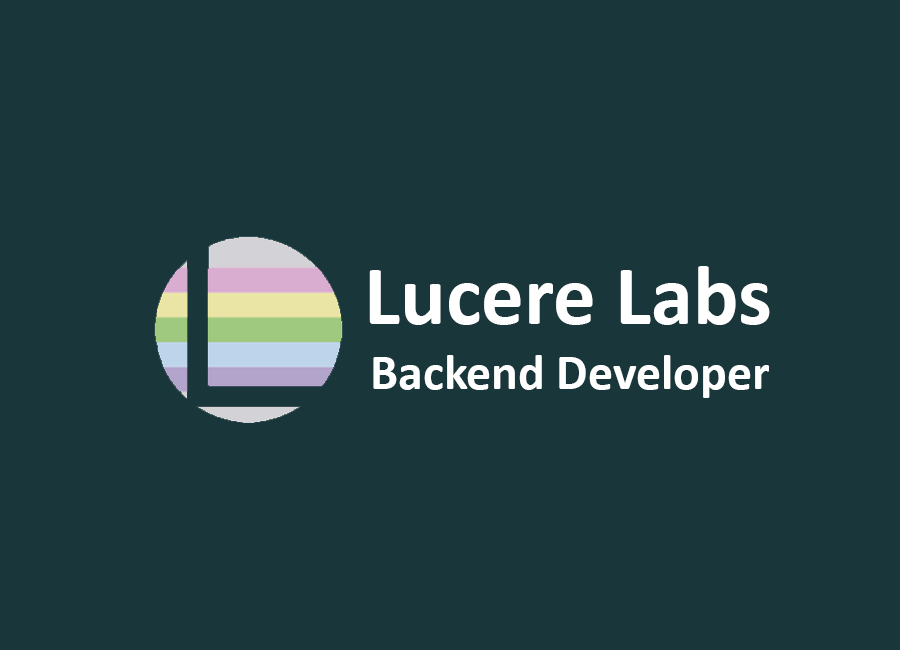
<style>
.page{position:relative;width:900px;height:650px;background:#19373b}
.page>*{position:absolute;margin:0}
.t1{font:85px "Calibri-Bold";color:#ffffff}
.t2{font:50px "Calibri-Bold";color:#ffffff}
</style>
<div class="page">
<p class="t1" style="left:369px;top:266px;width:401px;height:59px">Lucere Labs</p>
<p class="t2" style="left:373px;top:355px;width:396px;height:43px">Backend Developer</p>
</div>
